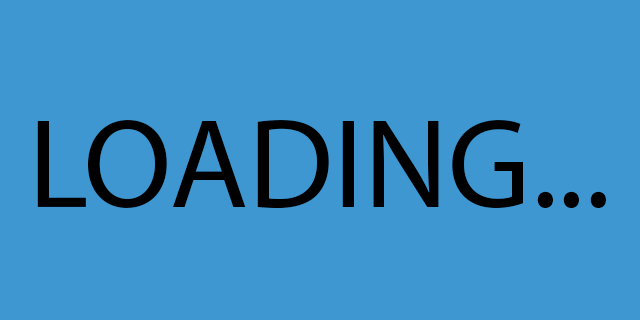
<style>
.page{position:relative;width:640px;height:320px;background:#3e97d1}
.page>*{position:absolute;margin:0}
.t1{font:128px "MyriadPro-Regular";color:#000000}
</style>
<div class="page">
<p class="t1" style="left:37px;top:120px;width:569px;height:89px">LOADING...</p>
</div>
